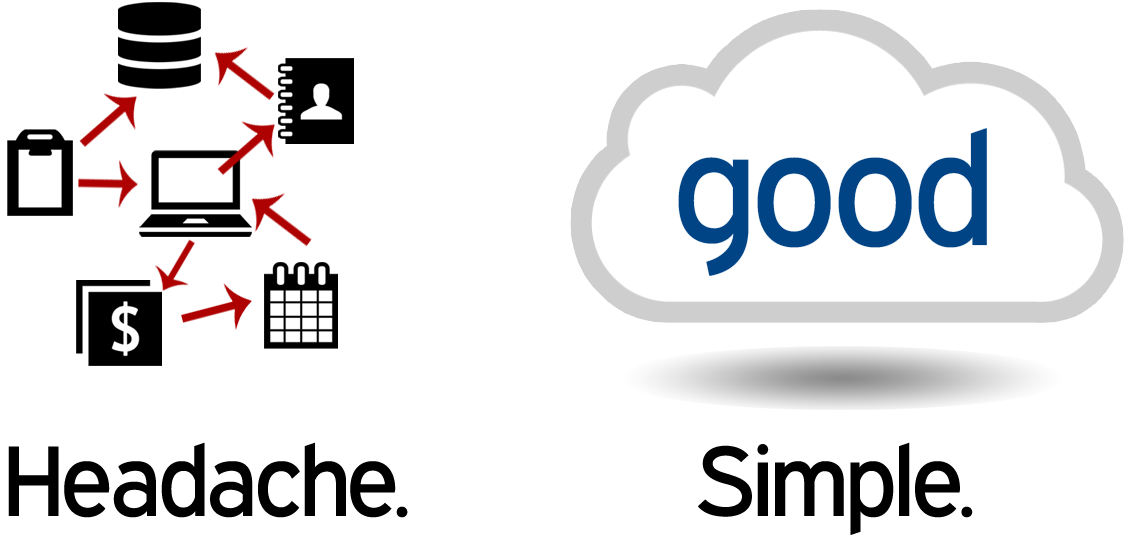
<style>
.page{position:relative;width:1131px;height:538px;background:#ffffff}
.page>*{position:absolute;margin:0}
.t1{font:100px "ExpresswayRg-Regular";color:#000000}
</style>
<div class="page">
<p class="t1" style="left:8px;top:442px;width:400px;height:76px">Headache.</p>
<p class="t1" style="left:698px;top:442px;width:275px;height:93px">Simple.</p>
</div>
